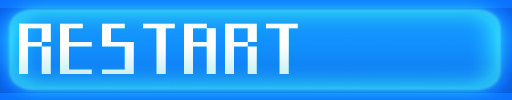
<style>
.page{position:relative;width:512px;height:100px}
.page>*{position:absolute;margin:0}
.t1{font:66.6px "Starcadia";color:#fffefe}
</style>
<div class="page">
<p class="t1" style="left:19px;top:23px;width:279px;height:51px">RESTART</p>
</div>
